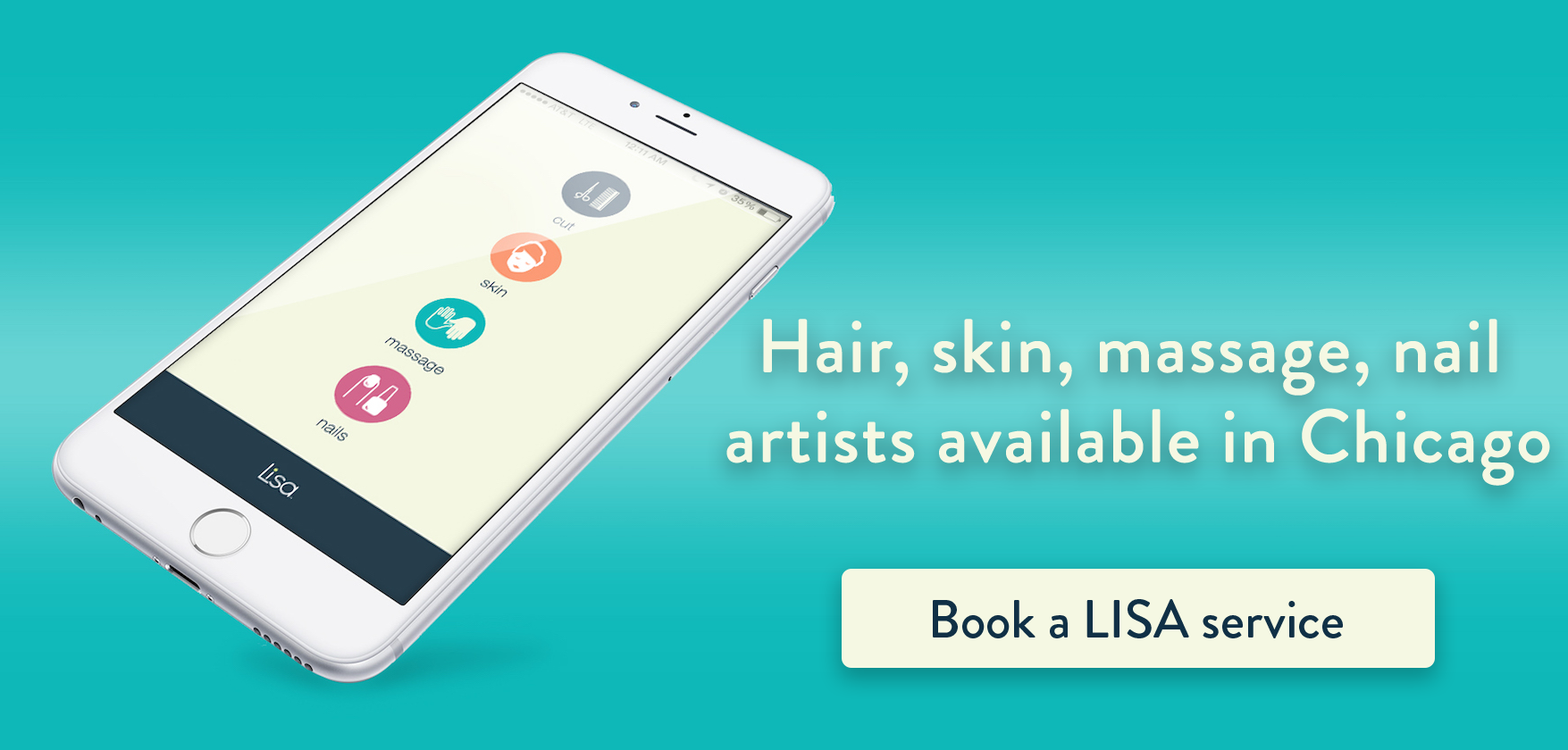
<style>
.page{position:relative;width:1568px;height:750px}
.page>*{position:absolute;margin:0}
.t1{font:75px "BrandonGrotesque-Medium";color:#f5f8e3;font-weight:bold}
.t2{font:53.6px "BrandonGrotesque-Medium";color:#103046}
</style>
<div class="page">
<p class="t1" style="left:726px;top:319px;width:824px;height:167px;text-align:center">Hair, skin, massage, nail <br>artists available in Chicago</p>
<p class="t2" style="left:933px;top:600px;width:410px;height:39px">Book a LISA service</p>
</div>
